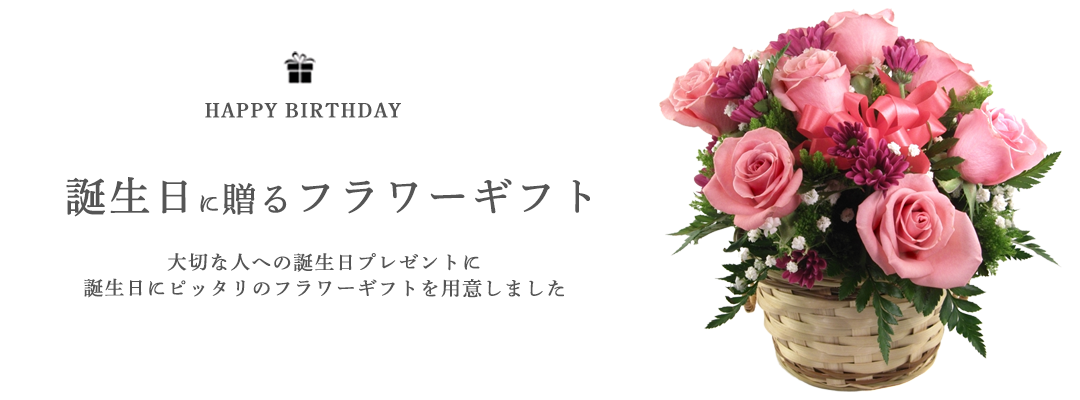
<style>
.page{position:relative;width:1080px;height:400px;background:#ffffff}
.page>*{position:absolute;margin:0}
.t1{font:20.8px "DNPShueiMinPr6-M";letter-spacing:0.05em;color:#555555;font-weight:bold}
.t2{font:40.7px "DNPShueiMinPr6-M";letter-spacing:0.05em;color:#555555;font-weight:bold}
.t3{font:22.6px "DNPShueiMinPr6-M";letter-spacing:0.05em;color:#555555;font-weight:bold}
.t4{font:33.9px "DNPShueiMinPr6-M";letter-spacing:0.05em;color:#555555;font-weight:bold}
.t5{font:19.4px/25.9px "DNPShueiMinPr6-M";letter-spacing:0.05em;color:#555555;font-weight:bold}
.t6{font:19.4px/17.3px "DNPShueiMinPr6-M";letter-spacing:0.05em;color:#555555;font-weight:bold}
</style>
<div class="page">
<p class="t1" style="left:205px;top:102px;width:196px;height:16px">HAPPY BIRTHDAY</p>
<p class="t2" style="left:66px;top:177px;width:524px;height:40px">誕生日<span class="t3">に</span><span class="t4">贈る</span>フラワーギフト</p>
<p class="t5" style="left:84px;top:253px;width:480px;height:45px;text-align:center"><span class="t6">大切な人への誕生日</span>プレゼントに<br>誕生日にピッタリのフラワーギフトを用意しました</p>
</div>
